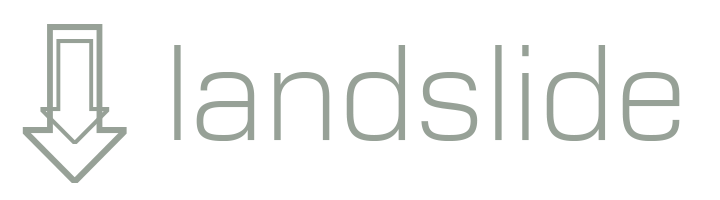
<style>
.page{position:relative;width:720px;height:200px;background:#ffffff}
.page>*{position:absolute;margin:0}
.t1{font:240.4px "ArialUnicodeMS";color:#97a197}
.t2{font:159.3px "ArialUnicodeMS";color:#97a197}
.t3{font:130px "Moire-Light";color:#97a197}
</style>
<div class="page">
<p class="t1" style="left:22px;top:24px;width:105px;height:159px">⇩</p>
<p class="t2" style="left:40px;top:39px;width:70px;height:105px">⇩</p>
<p class="t3" style="left:174px;top:45px;width:506px;height:96px">landslide</p>
</div>
